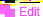
<style>
.page{position:relative;width:43px;height:17px;background:#ffffff}
.page>*{position:absolute;margin:0}
.t1{font:12px "ArialMT"}
</style>
<div class="page">
<p class="t1" style="left:20px;top:4px;width:20px;height:9px">Edit</p>
</div>
